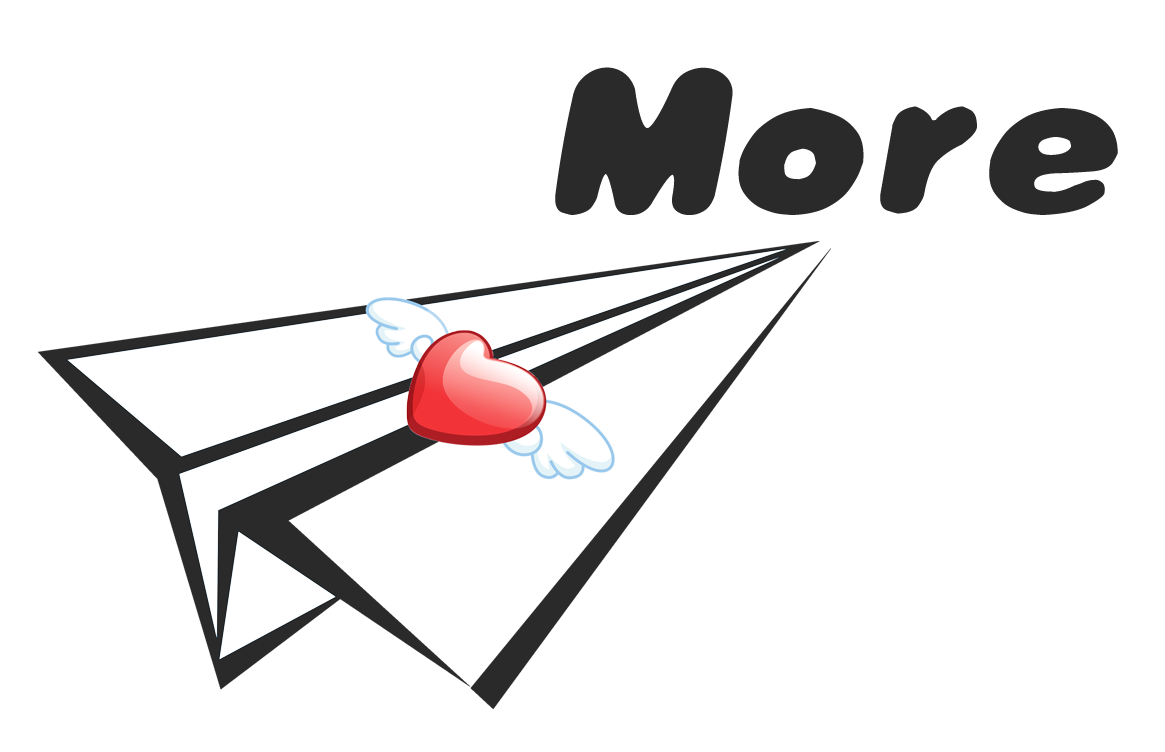
<style>
.page{position:relative;width:1165px;height:752px;background:#ffffff}
.page>*{position:absolute;margin:0}
.t1{font:200px "HGPTY_CNKI";color:#2a2a2a;font-weight:bold;font-style:italic}
</style>
<div class="page">
<p class="t1" style="left:555px;top:67px;width:563px;height:148px">More</p>
</div>
